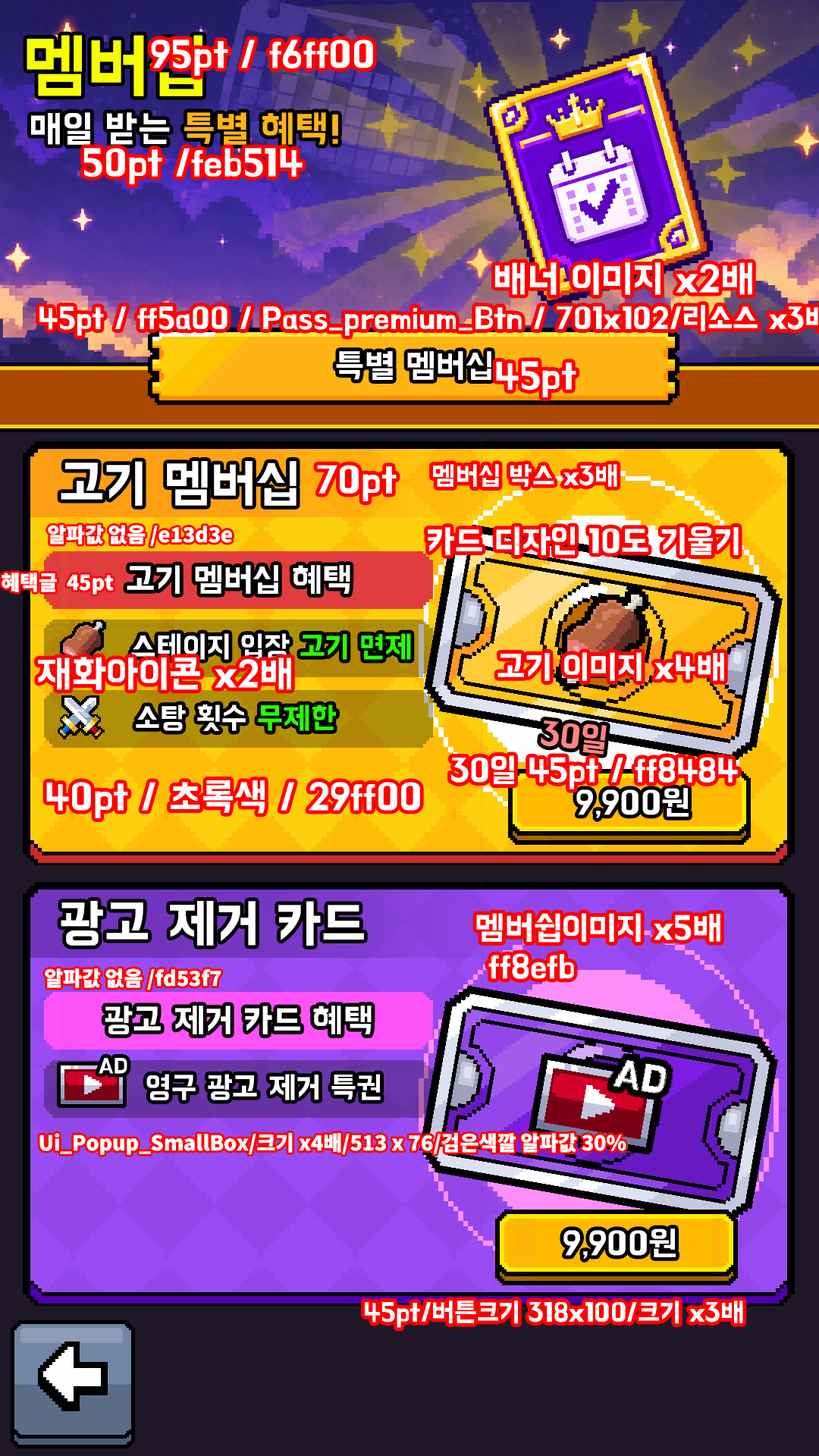
<style>
.page{position:relative;width:819px;height:1456px}
.page>*{position:absolute;margin:0}
.t1{font:72px "BMHANNAProOTF";color:#f6ff00}
.t2{font:38.3px "BMHANNAProOTF";color:#ffffff}
.t3{font:37.9px "BMHANNAProOTF";color:#feb514}
.t4{font:37.9px "BMHANNAProOTF";color:#ffffff}
.t5{font:34.1px "BMHANNAProOTF";color:#ffffff}
.t6{font:53.1px "BMHANNAProOTF";color:#ffffff}
.t7{font:26.8px "BMHANNAProOTF";color:#ffffff}
.t8{font:20.3px "NotoSansKR-Black";color:#ffffff}
.t9{font:33.6px "BMHANNAProOTF";color:#ffffff}
.t10{font:30.3px "BMHANNAProOTF";color:#ffffff}
.t11{font:30.3px "BMHANNAProOTF";color:#2aff00}
.t12{font:30.3px "BMHANNAProOTF";color:#29ff00}
.t13{font:34.1px "BMHANNAProOTF";color:#ff8484}
</style>
<div class="page">
<p class="t1" style="left:27px;top:35px;width:175px;height:61px">멤버십</p>
<p class="t2" style="left:151px;top:39px;width:222px;height:37px">95pt / f6ff00</p>
<p class="t3" style="left:31px;top:112px;width:307px;height:33px"><span class="t4">매일 받는 </span>특별 혜택!</p>
<p class="t2" style="left:83px;top:148px;width:220px;height:36px">50pt /feb514</p>
<p class="t2" style="left:495px;top:262px;width:257px;height:33px">배너 이미지 x2배</p>
<p class="t5" style="left:336px;top:351px;width:155px;height:29px">특별 멤버십</p>
<p class="t2" style="left:496px;top:361px;width:80px;height:36px">45pt</p>
<p class="t6" style="left:61px;top:461px;width:236px;height:45px">고기 멤버십</p>
<p class="t2" style="left:317px;top:465px;width:80px;height:36px">70pt</p>
<p class="t7" style="left:433px;top:464px;width:184px;height:23px">멤버십 박스 x3배</p>
<p class="t8" style="left:48px;top:525px;width:184px;height:22px">알파값 없음 /e13d3e</p>
<p class="t9" style="left:428px;top:526px;width:311px;height:29px">카드 디자인 10도 기울기</p>
<p class="t5" style="left:127px;top:565px;width:223px;height:29px">고기 멤버십 혜택</p>
<p class="t8" style="left:2px;top:573px;width:112px;height:22px">혜택글  45pt</p>
<p class="t10" style="left:131px;top:633px;width:280px;height:27px">스테이지 입장 <span class="t11">고기 면제</span></p>
<p class="t9" style="left:497px;top:652px;width:227px;height:29px">고기 이미지 x4배</p>
<p class="t2" style="left:38px;top:657px;width:253px;height:33px">재화아이콘 x2배</p>
<p class="t10" style="left:136px;top:704px;width:200px;height:27px">소탕 횟수 <span class="t12">무제한</span></p>
<p class="t13" style="left:541px;top:720px;width:66px;height:35px;rotate:7deg">30일</p>
<p class="t9" style="left:450px;top:755px;width:288px;height:34px">30일 45pt / ff8484</p>
<p class="t9" style="left:450px;top:755px;width:288px;height:34px">30일 45pt / ff8484</p>
<p class="t2" style="left:46px;top:780px;width:374px;height:38px">40pt / 초록색 / 29ff00</p>
<p class="t5" style="left:576px;top:788px;width:113px;height:30px">9,900원</p>
<p class="t6" style="left:61px;top:901px;width:303px;height:45px">광고 제거 카드</p>
<p class="t9" style="left:476px;top:913px;width:244px;height:30px">멤버쉽이미지 x5배</p>
<p class="t9" style="left:488px;top:953px;width:86px;height:26px">ff8efb</p>
<p class="t8" style="left:45px;top:968px;width:176px;height:22px">알파값 없음 /fd53f7</p>
<p class="t5" style="left:105px;top:1006px;width:267px;height:28px">광고 제거 카드 혜택</p>
<p class="t10" style="left:146px;top:1074px;width:235px;height:26px">영구 광고 제거 특권</p>
<p class="t8" style="left:39px;top:1133px;width:587px;height:22px">Ui_Popup_SmallBox/크기 x4배/513 x 76/검은색깔 알파값 30%</p>
<p class="t5" style="left:563px;top:1228px;width:113px;height:31px">9,900원</p>
<p class="t7" style="left:365px;top:1301px;width:378px;height:27px">45pt/버튼크기 318x100/크기 x3배</p>
</div>
